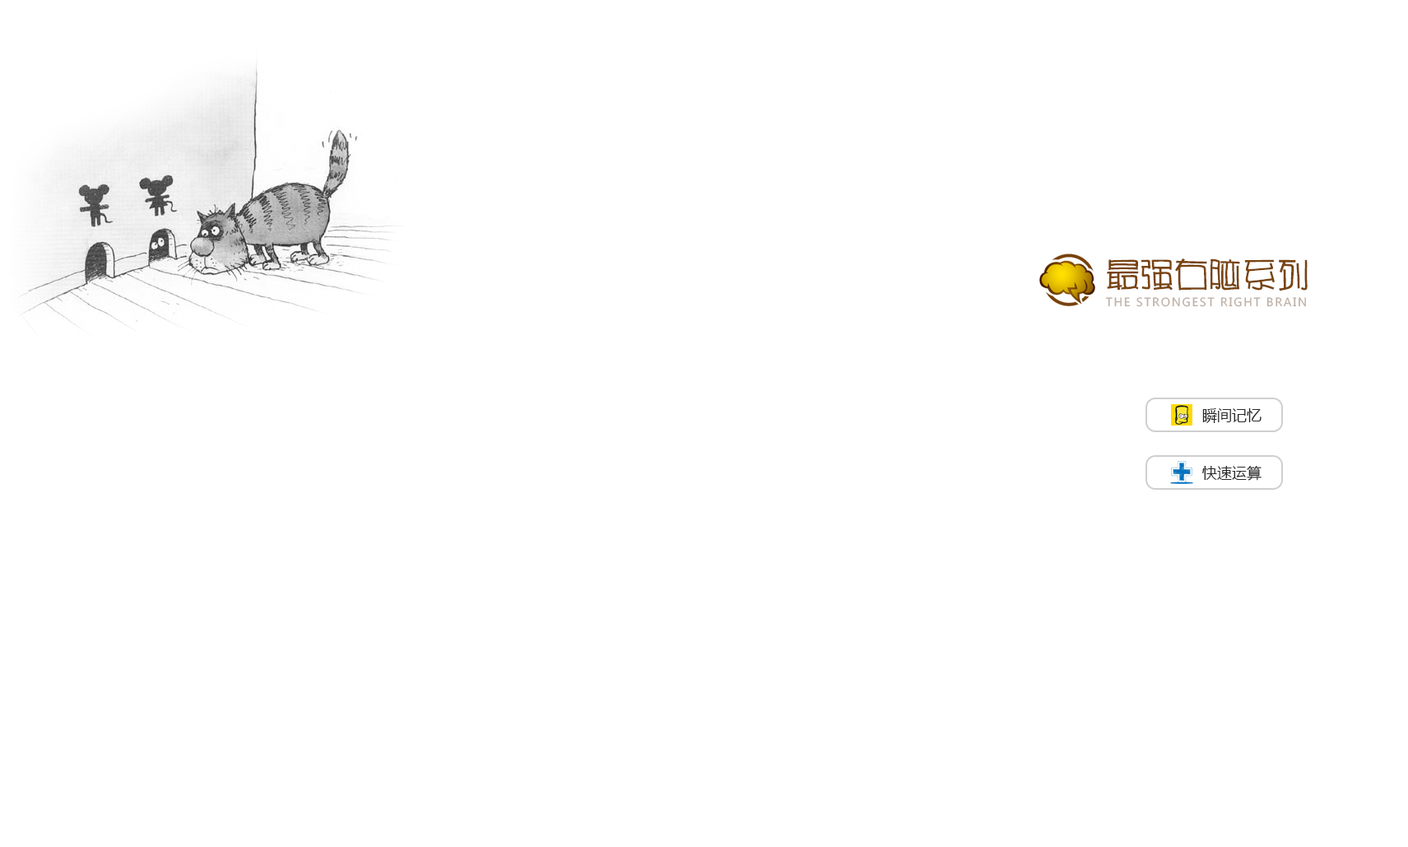
<style>
.page{position:relative;width:1408px;height:847px;background:#ffffff}
.page>*{position:absolute;margin:0}
.t1{font:33.9px "HYr2gj";color:#794410}
.t2{font:11.3px "MicrosoftYaHei";letter-spacing:0.12em;color:#bfb1a6;text-transform:uppercase}
.t3{font:14.8px "MicrosoftYaHei";color:#292929}
</style>
<div class="page">
<p class="t1" style="left:1107px;top:258px;width:201px;height:33px">最强右脑系列</p>
<p class="t2" style="left:1105px;top:297px;width:201px;height:10px">the Strongest right brain</p>
<p class="t3" style="left:1202px;top:408px;width:60px;height:15px">瞬间记忆</p>
<p class="t3" style="left:1202px;top:465px;width:60px;height:16px">快速运算</p>
</div>
